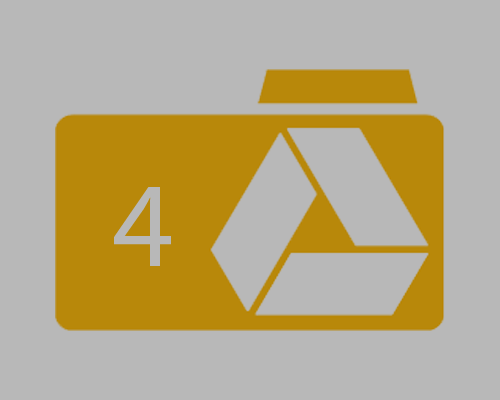
<style>
.page{position:relative;width:500px;height:400px;background:#b8b8b8}
.page>*{position:absolute;margin:0}
.t1{font:120.8px "MyriadPro-Regular";color:#b8b8b8}
</style>
<div class="page">
<p class="t1" style="left:114px;top:187px;width:57px;height:79px">4</p>
</div>
